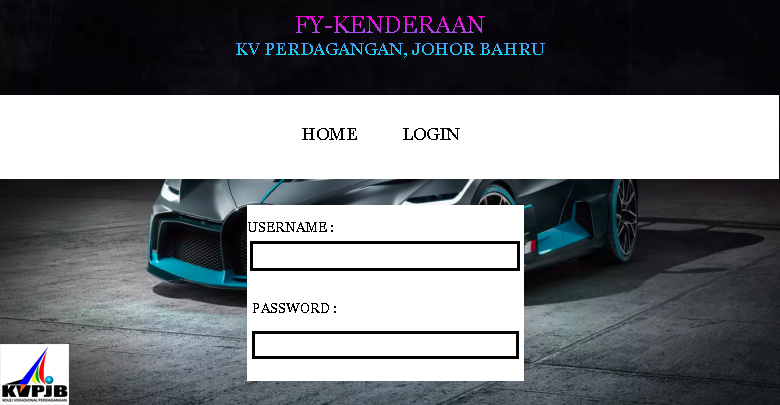
<style>
.page{position:relative;width:780px;height:405px;background:#ffffff}
.page>*{position:absolute;margin:0}
.t1{font:18px "Vani"}
.t2{font:24px "Vani"}
.t3{font:18px "Vani";color:#010000}
.t4{font:14px "Vani";color:#000000}
</style>
<div class="page">
<p class="t1" style="left:236px;top:16px;width:309px;height:42px;text-align:center"><span class="t2">FY-KENDERAAN<br></span>KV PERDAGANGAN, JOHOR BAHRU</p>
<p class="t3" style="left:302px;top:128px;width:158px;height:12px">HOME           LOGIN</p>
<p class="t4" style="left:248px;top:222px;width:85px;height:10px">USERNAME :</p>
<p class="t4" style="left:253px;top:303px;width:83px;height:10px">PASSWORD :</p>
</div>
